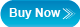
<style>
.page{position:relative;width:80px;height:27px}
.page>*{position:absolute;margin:0}
.t1{font:12px "Arial-BoldMT";color:#fefdfd}
</style>
<div class="page">
<p class="t1" style="left:9px;top:8px;width:52px;height:11px">Buy Now</p>
</div>
